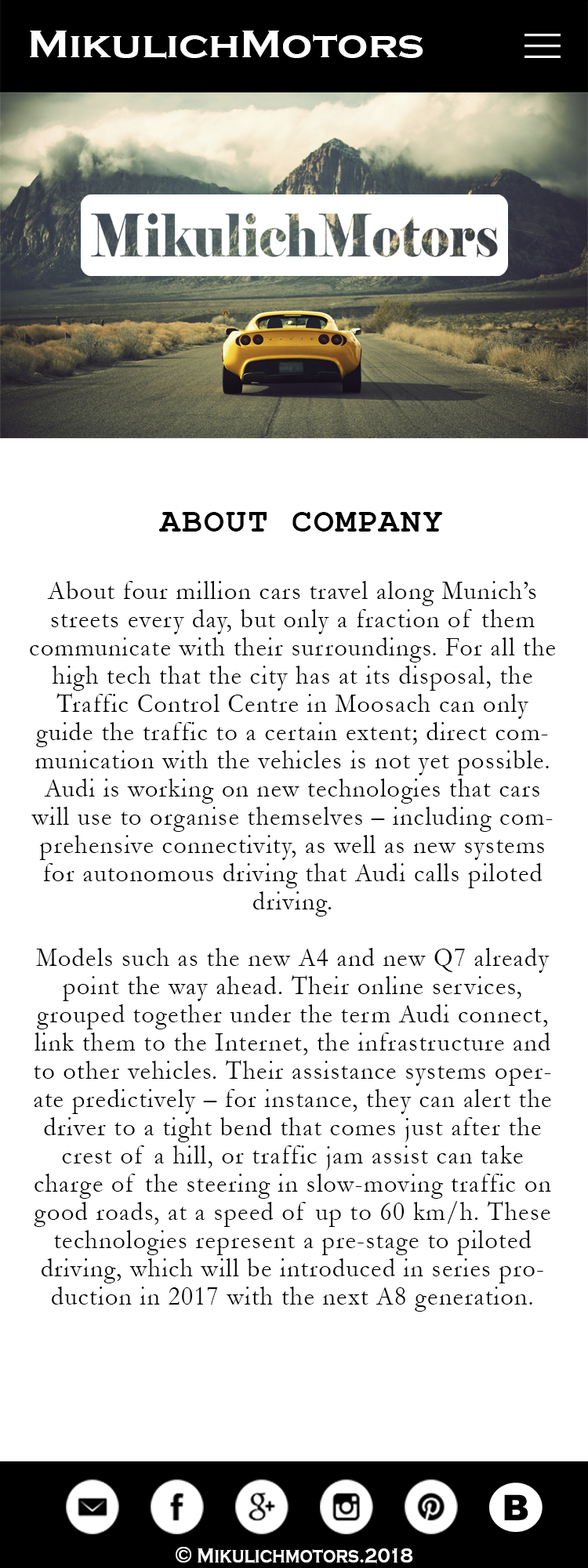
<style>
.page{position:relative;width:588px;height:1568px;background:#ffffff}
.page>*{position:absolute;margin:0}
.t1{font:39.2px "CopperplateGothic-Bold";color:#ffffff;scale:1.11 1}
.t2{font:33.7px "CourierNewPS-BoldMT";letter-spacing:0.05em;color:#000000}
.t3{font:27.4px/28.2px "Garamond";letter-spacing:0.05em;color:#000000;scale:0.9 1}
.t4{font:21.6px "CopperplateGothic-Bold";color:#ffffff;scale:0.83 1}
.t5{font:23.5px "CopperplateGothic-Bold";color:#ffffff;scale:0.83 1}
</style>
<div class="page">
<p class="t1" style="left:30px;top:31px;width:393px;height:28px">MikulichMotors</p>
<p class="t2" style="left:159px;top:512px;width:284px;height:20px">ABOUT COMPANY</p>
<p class="t3" style="left:30px;top:581px;width:526px;height:731px;text-align:center">About four million cars travel along Munich’s streets every day, but only a fraction of them communicate with their surroundings. For all the high tech that the city has at its disposal, the Traffic Control Centre in Moosach can only guide the traffic to a certain extent; direct communication with the vehicles is not yet possible. Audi is working on new technologies that cars will use to organise themselves – including comprehensive connectivity, as well as new systems for autonomous driving that Audi calls piloted driving.<br><br>Models such as the new A4 and new Q7 already point the way ahead. Their online services, grouped together under the term Audi connect, link them to the Internet, the infrastructure and to other vehicles. Their assistance systems operate predictively – for instance, they can alert the driver to a tight bend that comes just after the crest of a hill, or traffic jam assist can take charge of the steering in slow-moving traffic on good roads, at a speed of up to 60 km/h. These technologies represent a pre-stage to piloted driving, which will be introduced in series production in 2017 with the next A8 generation.</p>
<p class="t4" style="left:176px;top:1547px;width:237px;height:16px"><span class="t5">©</span> Mikulichmotors.2018</p>
</div>
